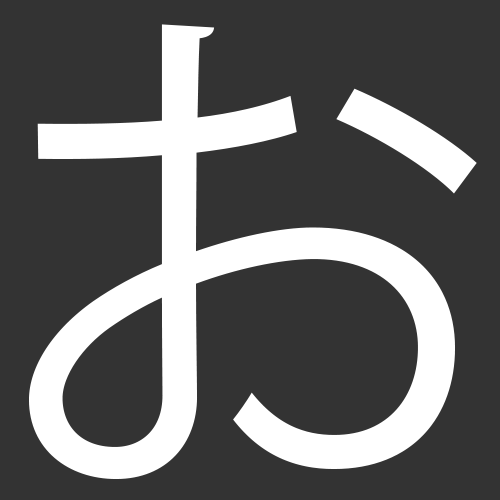
<style>
.page{position:relative;width:500px;height:500px;background:#333333}
.page>*{position:absolute;margin:0}
.t1{font:515.5px "KozGoPr6N-Regular";color:#ffffff}
</style>
<div class="page">
<p class="t1" style="left:29px;top:24px;width:448px;height:456px">お</p>
</div>
